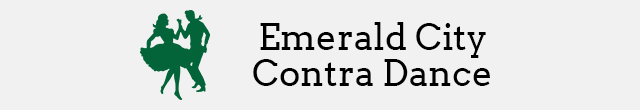
<style>
.page{position:relative;width:640px;height:110px;background:#f1f1f1}
.page>*{position:absolute;margin:0}
.t1{font:36px/36px "Arvo";color:#000000}
</style>
<div class="page">
<p class="t1" style="left:253px;top:22px;width:237px;height:64px;text-align:center">Emerald City<br>Contra Dance</p>
</div>
